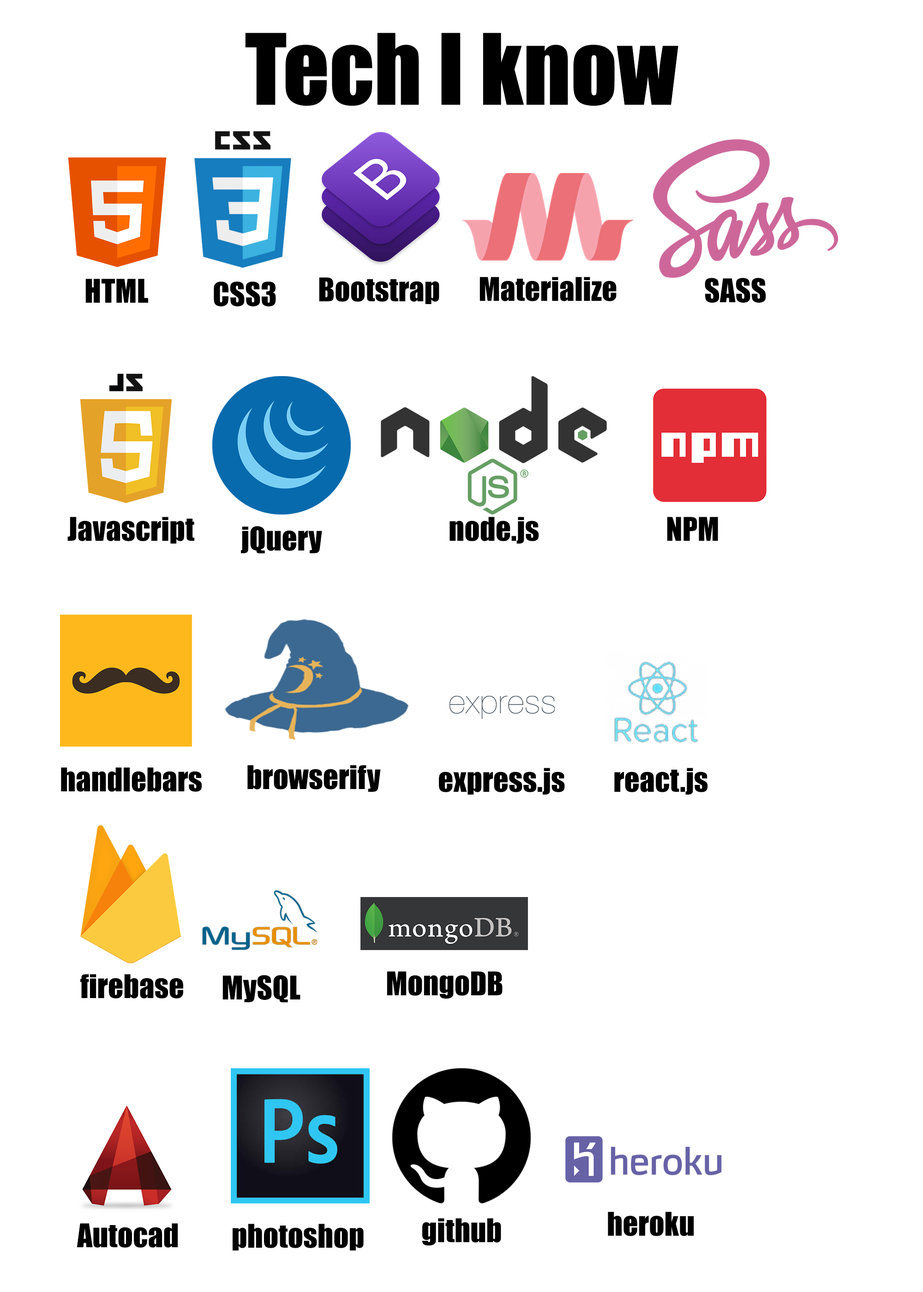
<style>
.page{position:relative;width:923px;height:1292px;background:#ffffff}
.page>*{position:absolute;margin:0}
.t1{font:90.8px "Impact";color:#000000}
.t2{font:30.3px "Impact";color:#000000}
</style>
<div class="page">
<p class="t1" style="left:245px;top:33px;width:433px;height:73px">Tech I know</p>
<p class="t2" style="left:85px;top:279px;width:63px;height:24px">HTML</p>
<p class="t2" style="left:214px;top:281px;width:62px;height:25px">CSS3</p>
<p class="t2" style="left:319px;top:277px;width:120px;height:27px">Bootstrap</p>
<p class="t2" style="left:479px;top:277px;width:137px;height:24px">Materialize</p>
<p class="t2" style="left:705px;top:278px;width:61px;height:25px">SASS</p>
<p class="t2" style="left:67px;top:517px;width:128px;height:27px">Javascript</p>
<p class="t2" style="left:449px;top:517px;width:90px;height:27px">node.js</p>
<p class="t2" style="left:667px;top:517px;width:51px;height:24px">NPM</p>
<p class="t2" style="left:241px;top:526px;width:81px;height:28px">jQuery</p>
<p class="t2" style="left:61px;top:767px;width:141px;height:25px">handlebars</p>
<p class="t2" style="left:247px;top:765px;width:134px;height:27px">browserify</p>
<p class="t2" style="left:439px;top:768px;width:126px;height:27px">express.js</p>
<p class="t2" style="left:614px;top:768px;width:94px;height:27px">react.js</p>
<p class="t2" style="left:80px;top:974px;width:103px;height:25px">firebase</p>
<p class="t2" style="left:222px;top:975px;width:78px;height:28px">MySQL</p>
<p class="t2" style="left:387px;top:971px;width:116px;height:28px">MongoDB</p>
<p class="t2" style="left:608px;top:1212px;width:86px;height:24px">heroku</p>
<p class="t2" style="left:77px;top:1223px;width:101px;height:25px">Autocad</p>
<p class="t2" style="left:233px;top:1224px;width:131px;height:27px">photoshop</p>
<p class="t2" style="left:422px;top:1218px;width:79px;height:28px">github</p>
</div>
